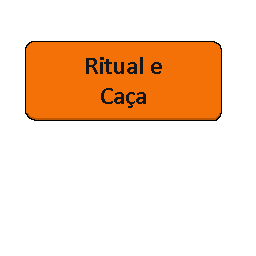
<style>
.page{position:relative;width:256px;height:256px;background:#ffffff}
.page>*{position:absolute;margin:0}
.t1{font:25px "Calibri-Bold";color:#141619}
</style>
<div class="page">
<p class="t1" style="left:86px;top:57px;width:76px;height:51px;text-align:center">Ritual e<br>Caça</p>
</div>
